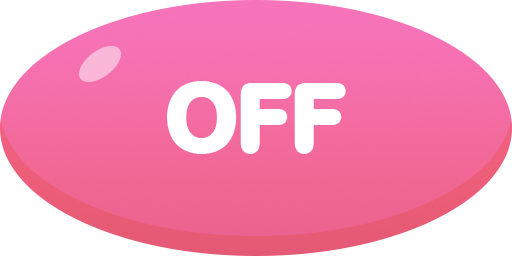
<style>
.page{position:relative;width:512px;height:256px;background:#ffffff}
.page>*{position:absolute;margin:0}
.t1{font:89.6px "ArialRoundedMTBold";color:#ffffff}
</style>
<div class="page">
<p class="t1" style="left:170px;top:84px;width:173px;height:67px">OFF</p>
</div>
